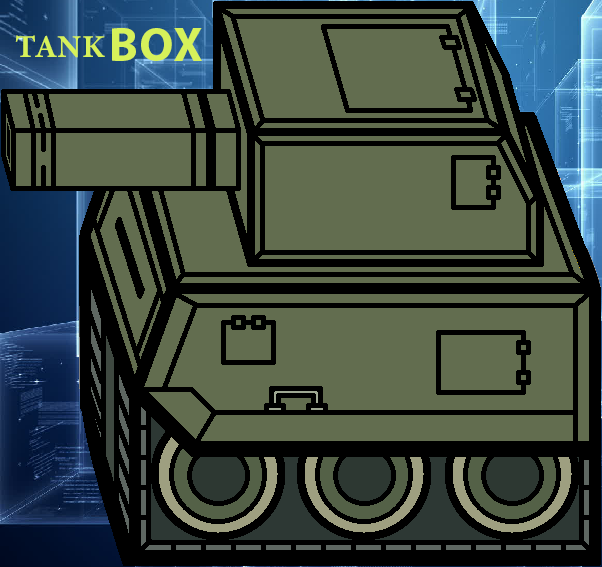
<style>
.page{position:relative;width:602px;height:567px;background:#626d4f}
.page>*{position:absolute;margin:0}
.t1{font:48px "MyriadPro-Bold";letter-spacing:0.02em;color:#d6f15a;text-transform:uppercase}
.t2{font:32px "MinionConceptRoman-Bold";letter-spacing:0.02em;color:#d6f15a;text-transform:uppercase}
</style>
<div class="page">
<p class="t1" style="left:112px;top:28px;width:90px;height:33px">box</p>
<p class="t2" style="left:15px;top:35px;width:90px;height:23px">tank</p>
</div>
